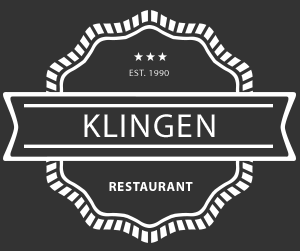
<style>
.page{position:relative;width:300px;height:251px;background:#333333}
.page>*{position:absolute;margin:0}
.t1{font:9.3px "MyriadPro-Regular";letter-spacing:0.05em}
.t2{font:33.4px "MyriadPro-Regular";letter-spacing:0.05em;color:#ffffff}
.t3{font:13.1px "MyriadPro-Bold";letter-spacing:0.05em;color:#ffffff}
</style>
<div class="page">
<p class="t1" style="left:129px;top:69px;width:40px;height:7px">EST. 1990</p>
<p class="t2" style="left:84px;top:114px;width:131px;height:24px">KLINGEN</p>
<p class="t3" style="left:109px;top:182px;width:84px;height:9px">RESTAURANT</p>
</div>
